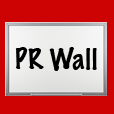
<style>
.page{position:relative;width:114px;height:114px;background:#cd0202}
.page>*{position:absolute;margin:0}
.t1{font:26px "MarkerFelt-Thin";color:#000000}
</style>
<div class="page">
<p class="t1" style="left:15px;top:47px;width:82px;height:24px">PR Wall</p>
</div>
